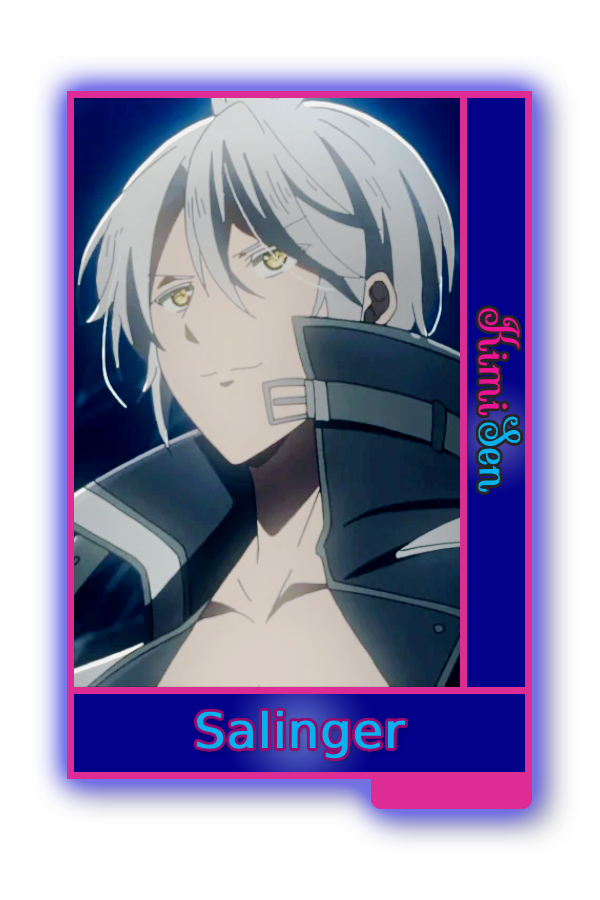
<style>
.page{position:relative;width:600px;height:900px;background:#ffffff}
.page>*{position:absolute;margin:0}
.t1{font:48.8px "Sevillana-Regular";color:#ee1294;font-weight:bold}
.t2{font:48.8px "Sevillana-Regular";color:#07b0ef;font-weight:bold}
.t3{font:49px "CoolveticaRg-Regular";color:#07b0ef;font-weight:bold}
</style>
<div class="page">
<p class="t1" style="left:478px;top:308px;width:43px;height:184px;rotate:90deg">Kimi<span class="t2">Sen</span></p>
<p class="t3" style="left:196px;top:710px;width:210px;height:49px">Salinger</p>
</div>
